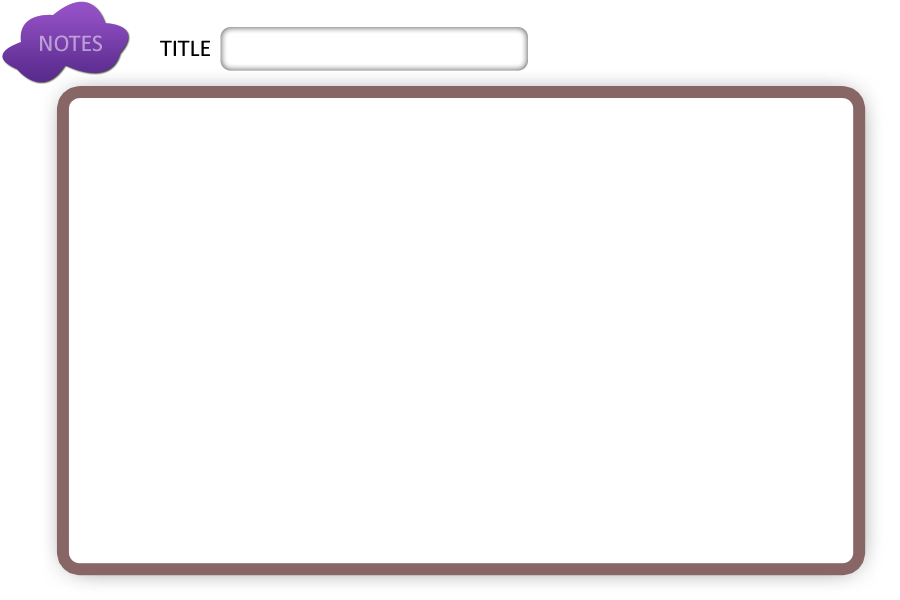
<style>
.page{position:relative;width:900px;height:600px;background:#ffffff}
.page>*{position:absolute;margin:0}
.t1{font:24px "Calibri";color:#bb9fd5}
.t2{font:24px "Calibri";color:#000000}
</style>
<div class="page">
<p class="t1" style="left:40px;top:35px;width:62px;height:17px">NOTES</p>
<p class="t2" style="left:160px;top:40px;width:50px;height:16px">TITLE</p>
</div>
